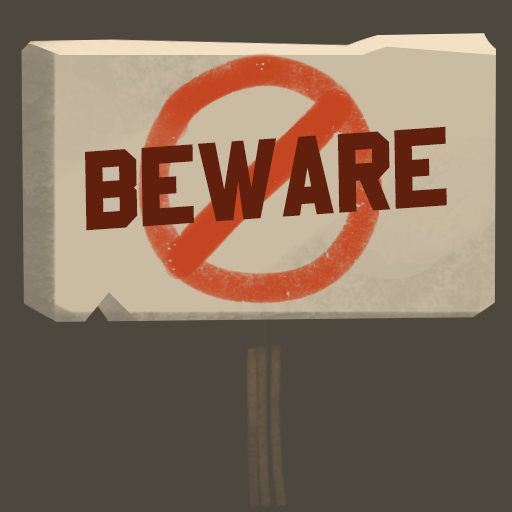
<style>
.page{position:relative;width:512px;height:512px;background:#4d473e}
.page>*{position:absolute;margin:0}
.t1{font:112.1px "PopWarner";color:#611f0c}
</style>
<div class="page">
<p class="t1" style="left:85px;top:126px;width:362px;height:105px;rotate:-4deg">BEWARE</p>
</div>
